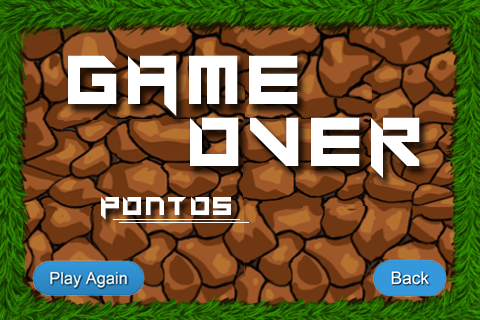
<style>
.page{position:relative;width:480px;height:320px}
.page>*{position:absolute;margin:0}
.t1{font:96.4px "Super-glue";color:#ffffff}
.t2{font:36px "Super-glue";color:#ffffff}
</style>
<div class="page">
<p class="t1" style="left:68px;top:55px;width:230px;height:61px">GamE</p>
<p class="t1" style="left:190px;top:117px;width:230px;height:61px">Over</p>
<p class="t2" style="left:101px;top:197px;width:130px;height:23px">Pontos</p>
</div>
